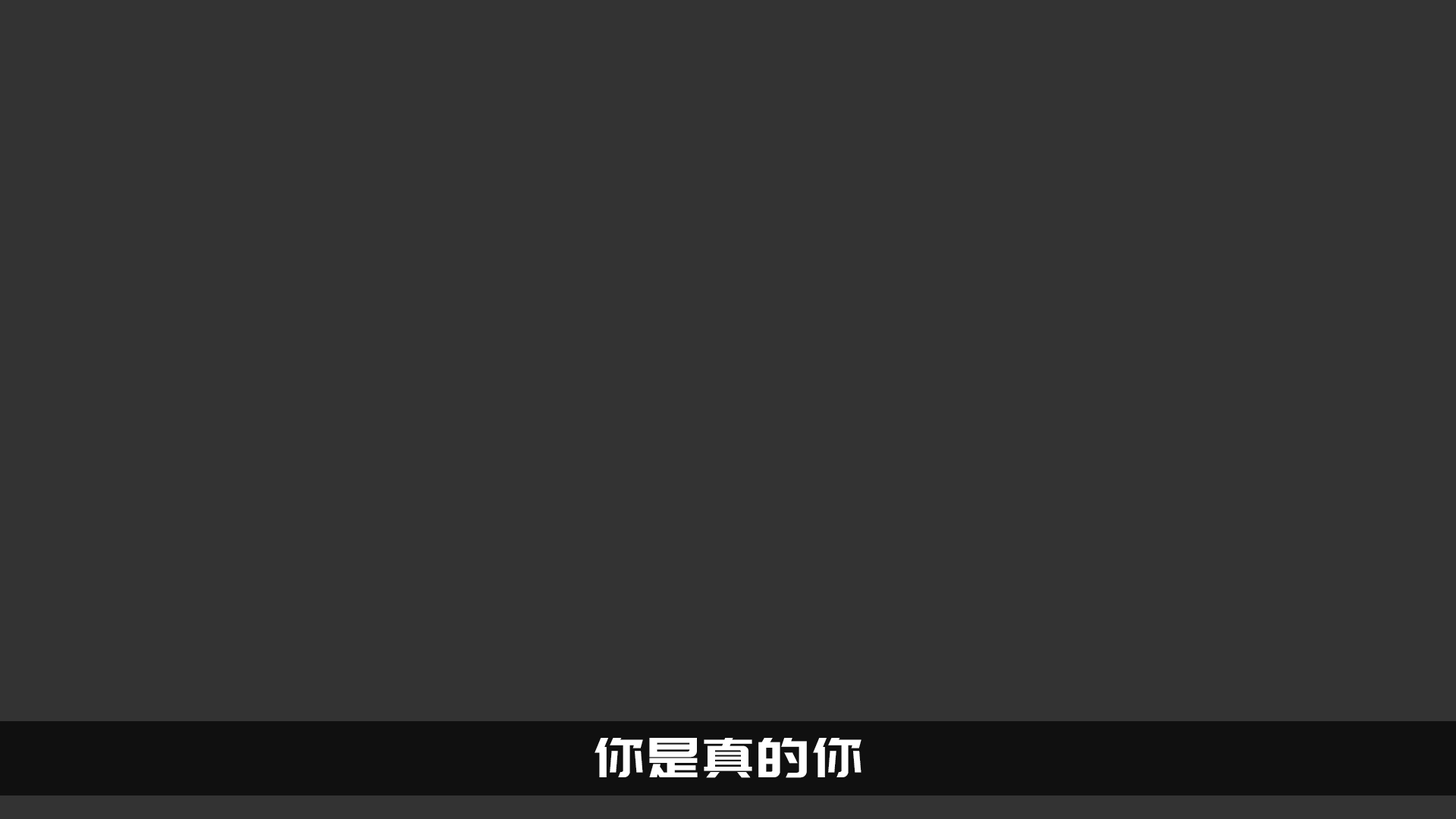
<style>
.page{position:relative;width:1456px;height:819px;background:#333333}
.page>*{position:absolute;margin:0}
.t1{font:54.6px "PangMenZhengDao-3";color:#ffffff}
</style>
<div class="page">
<p class="t1" style="left:595px;top:738px;width:266px;height:40px">你是真的你</p>
</div>
